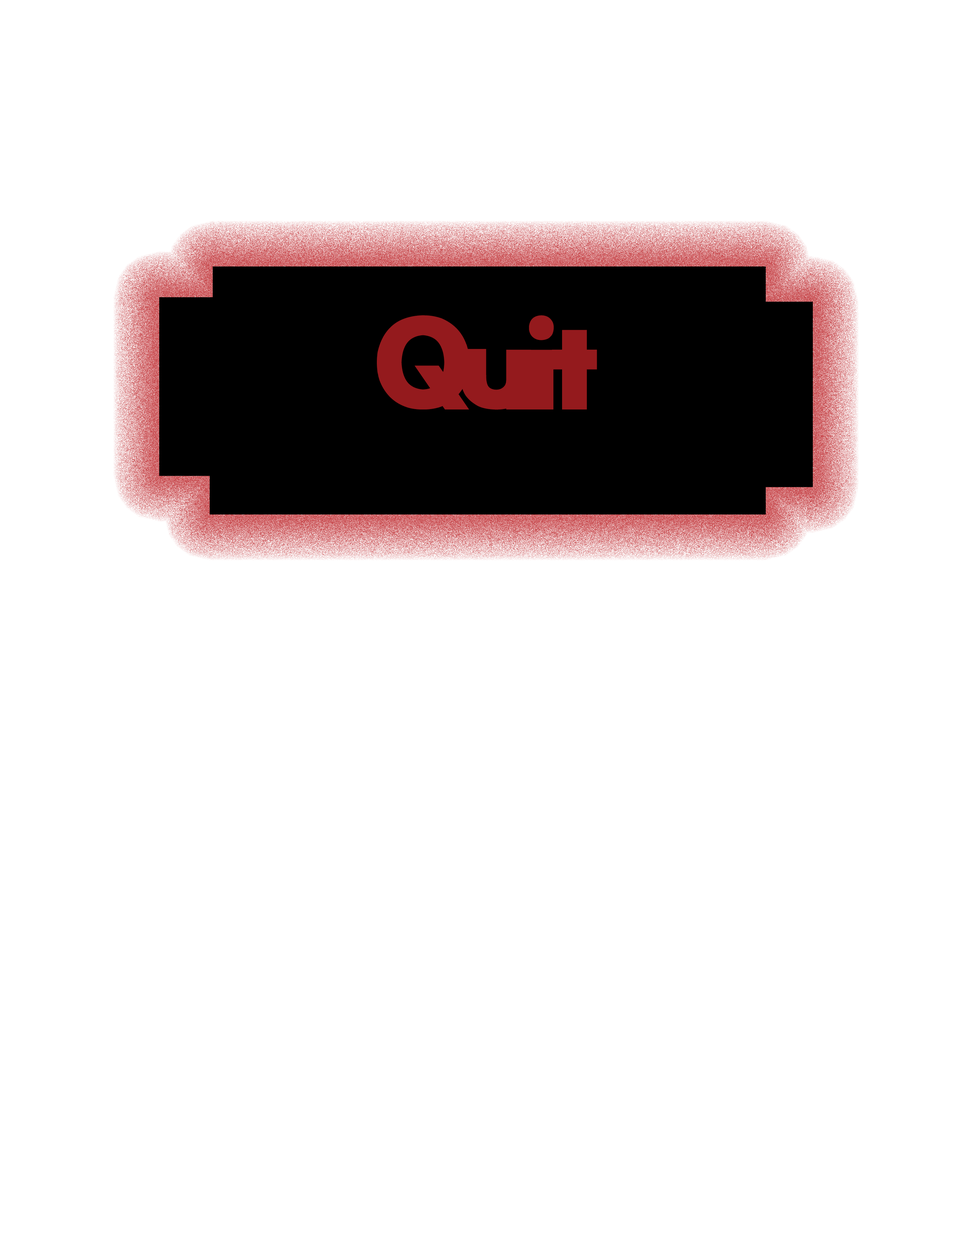
<style>
.page{position:relative;width:960px;height:1242px;background:#ffffff}
.page>*{position:absolute;margin:0}
.t1{font:94.1px "Sematary";color:#941a1d}
</style>
<div class="page">
<p class="t1" style="left:377px;top:315px;width:220px;height:95px">Quit</p>
</div>
